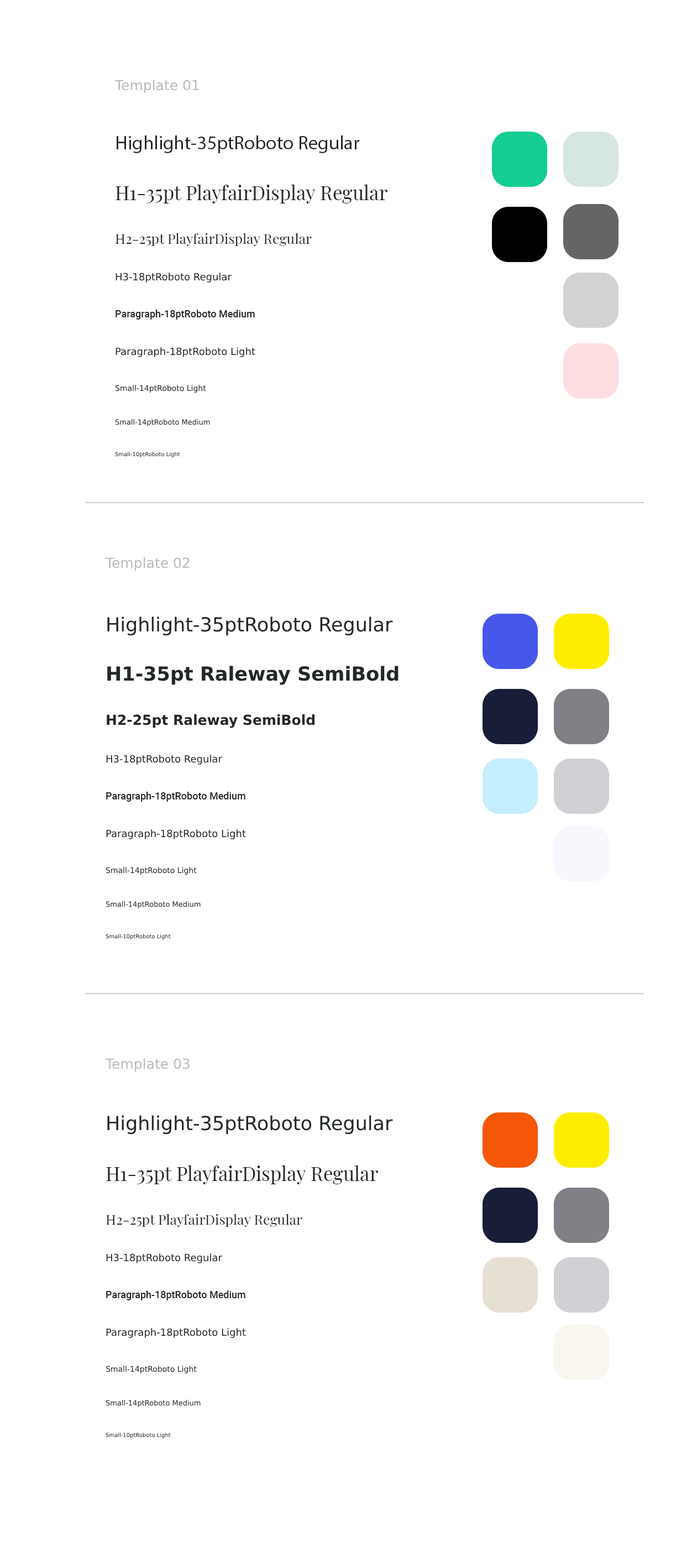
<style>
.page{position:relative;width:692px;height:1568px;background:#ffffff}
.page>*{position:absolute;margin:0}
.t1{font:13.8px "RobotoRoman-Regular";color:#bababa}
.t2{font:19.4px "MyriadPro-Regular";color:#222825}
.t3{font:19.4px "PlayfairDisplay-Regular";color:#222825}
.t4{font:13.8px "PlayfairDisplay-Regular";color:#222825}
.t5{font:10px "RobotoRoman-Regular";color:#222825}
.t6{font:10px "Roboto-Medium";color:#222825}
.t7{font:10px "RobotoRoman-Light";color:#222825}
.t8{font:7.7px "RobotoRoman-Light";color:#222825}
.t9{font:7.2px "RobotoRoman-Medium";color:#222825}
.t10{font:5.5px "RobotoRoman-Light";color:#222825}
.t11{font:19.4px "RobotoRoman-Regular";color:#222825}
.t12{font:19.4px "RalewayRoman-SemiBold";color:#222825}
.t13{font:13.8px "RalewayRoman-SemiBold";color:#222825}
</style>
<div class="page">
<p class="t1" style="left:114px;top:80px;width:85px;height:13px">Template 01</p>
<p class="t2" style="left:117px;top:135px;width:243px;height:18px">Highlight-35ptRoboto Regular</p>
<p class="t3" style="left:116px;top:184px;width:272px;height:19px">H1-35pt PlayfairDisplay Regular</p>
<p class="t4" style="left:116px;top:233px;width:196px;height:13px">H2-25pt PlayfairDisplay Regular</p>
<p class="t5" style="left:116px;top:273px;width:116px;height:10px">H3-18ptRoboto Regular</p>
<p class="t6" style="left:116px;top:310px;width:139px;height:10px">Paragraph-18ptRoboto Medium</p>
<p class="t7" style="left:116px;top:347px;width:139px;height:10px">Paragraph-18ptRoboto Light</p>
<p class="t8" style="left:115px;top:385px;width:91px;height:8px">Small-14ptRoboto Light</p>
<p class="t9" style="left:115px;top:419px;width:95px;height:7px">Small-14ptRoboto Medium</p>
<p class="t10" style="left:115px;top:452px;width:65px;height:5px">Small-10ptRoboto Light</p>
<p class="t1" style="left:105px;top:557px;width:85px;height:14px">Template 02</p>
<p class="t11" style="left:107px;top:616px;width:286px;height:20px">Highlight-35ptRoboto Regular</p>
<p class="t12" style="left:107px;top:666px;width:292px;height:19px">H1-35pt Raleway SemiBold</p>
<p class="t13" style="left:107px;top:714px;width:208px;height:14px">H2-25pt Raleway SemiBold</p>
<p class="t5" style="left:106px;top:755px;width:116px;height:10px">H3-18ptRoboto Regular</p>
<p class="t6" style="left:106px;top:792px;width:139px;height:10px">Paragraph-18ptRoboto Medium</p>
<p class="t7" style="left:106px;top:829px;width:140px;height:10px">Paragraph-18ptRoboto Light</p>
<p class="t8" style="left:106px;top:867px;width:91px;height:8px">Small-14ptRoboto Light</p>
<p class="t9" style="left:106px;top:901px;width:95px;height:7px">Small-14ptRoboto Medium</p>
<p class="t10" style="left:106px;top:934px;width:65px;height:5px">Small-10ptRoboto Light</p>
<p class="t1" style="left:105px;top:1058px;width:85px;height:14px">Template 03</p>
<p class="t11" style="left:107px;top:1115px;width:286px;height:20px">Highlight-35ptRoboto Regular</p>
<p class="t3" style="left:106px;top:1165px;width:273px;height:19px">H1-35pt PlayfairDisplay Regular</p>
<p class="t4" style="left:106px;top:1214px;width:196px;height:13px">H2-25pt PlayfairDisplay Regular</p>
<p class="t5" style="left:106px;top:1253px;width:116px;height:10px">H3-18ptRoboto Regular</p>
<p class="t6" style="left:106px;top:1290px;width:139px;height:10px">Paragraph-18ptRoboto Medium</p>
<p class="t7" style="left:106px;top:1328px;width:140px;height:10px">Paragraph-18ptRoboto Light</p>
<p class="t8" style="left:106px;top:1366px;width:91px;height:7px">Small-14ptRoboto Light</p>
<p class="t9" style="left:106px;top:1400px;width:95px;height:7px">Small-14ptRoboto Medium</p>
<p class="t10" style="left:106px;top:1433px;width:65px;height:5px">Small-10ptRoboto Light</p>
</div>
